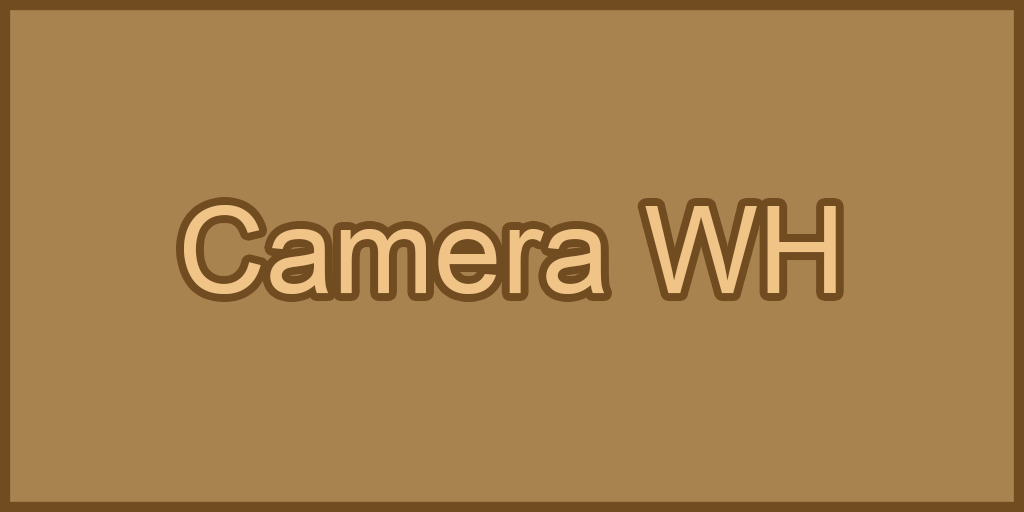
<style>
.page{position:relative;width:1024px;height:512px;background:#a9834f}
.page>*{position:absolute;margin:0}
.t1{font:121.3px "ArialMT";color:#f0c387}
</style>
<div class="page">
<p class="t1" style="left:184px;top:205px;width:652px;height:89px">Camera WH</p>
</div>
